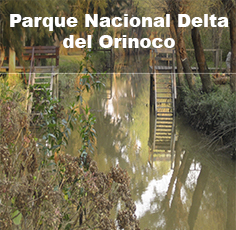
<style>
.page{position:relative;width:236px;height:230px}
.page>*{position:absolute;margin:0}
.t1{font:18px "Arial-Black";color:#ffffff}
</style>
<div class="page">
<p class="t1" style="left:10px;top:14px;width:219px;height:34px;text-align:center">Parque Nacional Delta del Orinoco</p>
</div>
